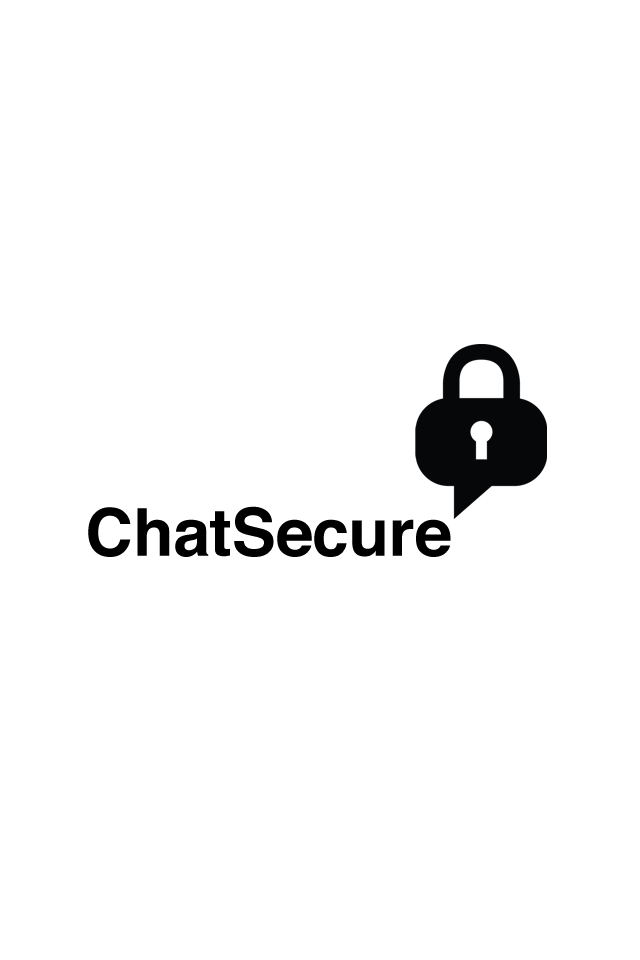
<style>
.page{position:relative;width:640px;height:960px;background:#ffffff}
.page>*{position:absolute;margin:0}
.t1{font:66px "Helvetica-Bold";color:#000000}
</style>
<div class="page">
<p class="t1" style="left:88px;top:506px;width:363px;height:51px">ChatSecure</p>
</div>
